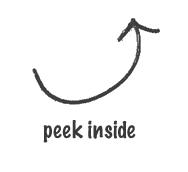
<style>
.page{position:relative;width:188px;height:172px;background:#ffffff}
.page>*{position:absolute;margin:0}
.t1{font:22px "MarkerFelt-Thin";letter-spacing:-0.01em;color:#393939}
</style>
<div class="page">
<p class="t1" style="left:43px;top:120px;width:93px;height:23px">peek inside</p>
</div>
